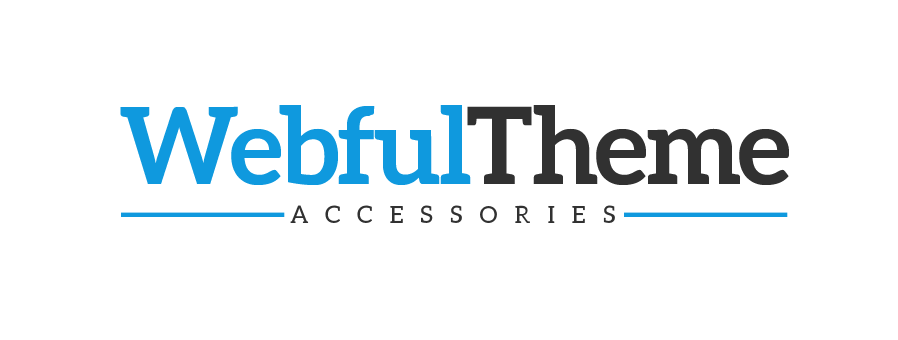
<style>
.page{position:relative;width:898px;height:340px;background:#ffffff}
.page>*{position:absolute;margin:0}
.t1{font:106px "Aleo-Bold";color:#0f99de}
.t2{font:106px "Aleo-Bold";color:#313131}
.t3{font:24px "Aleo-Regular";letter-spacing:0.72em;color:#313131;text-transform:uppercase}
</style>
<div class="page">
<p class="t1" style="left:120px;top:105px;width:669px;height:80px">Webful<span class="t2">Theme</span></p>
<p class="t3" style="left:290px;top:205px;width:325px;height:18px">Accessories</p>
</div>
